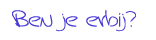
<style>
.page{position:relative;width:156px;height:40px;background:#ffffff}
.page>*{position:absolute;margin:0}
.t1{font:22.8px "Jerry'shandwriting";color:#483ad5;scale:1.16 1}
</style>
<div class="page">
<p class="t1" style="left:12px;top:10px;width:124px;height:22px">Ben je erbij?</p>
</div>
